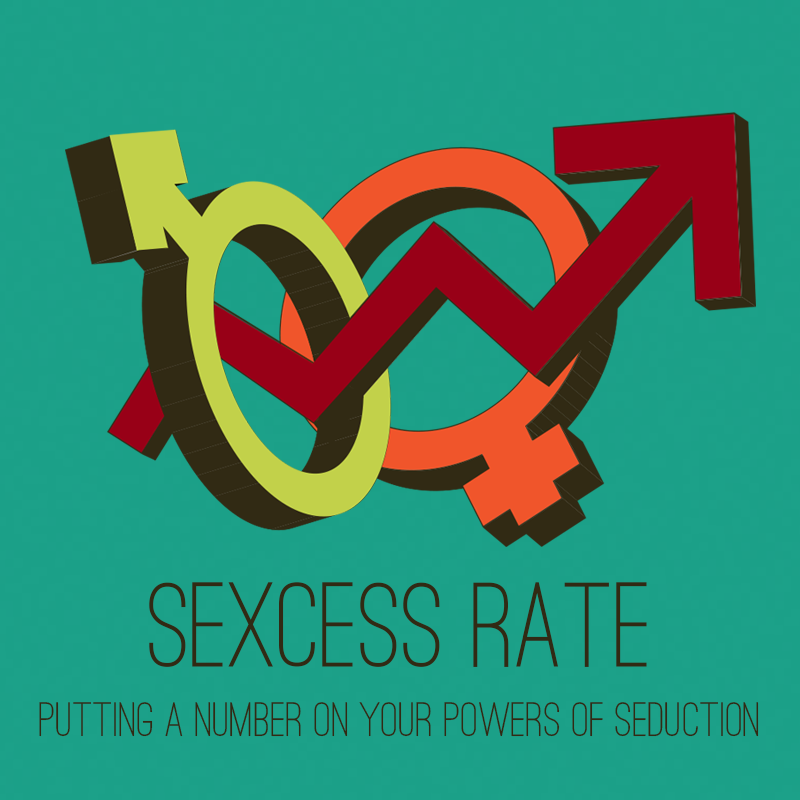
<style>
.page{position:relative;width:800px;height:800px;background:#1ba088}
.page>*{position:absolute;margin:0}
.t1{font:125px "OstrichSans-Medium";color:#312a14}
.t2{font:50px "OstrichSans-Medium";color:#312a14}
</style>
<div class="page">
<p class="t1" style="left:149px;top:582px;width:498px;height:85px">SEXCESS RATE</p>
<p class="t2" style="left:39px;top:702px;width:720px;height:35px">Putting a number on your powers of seduction</p>
</div>
